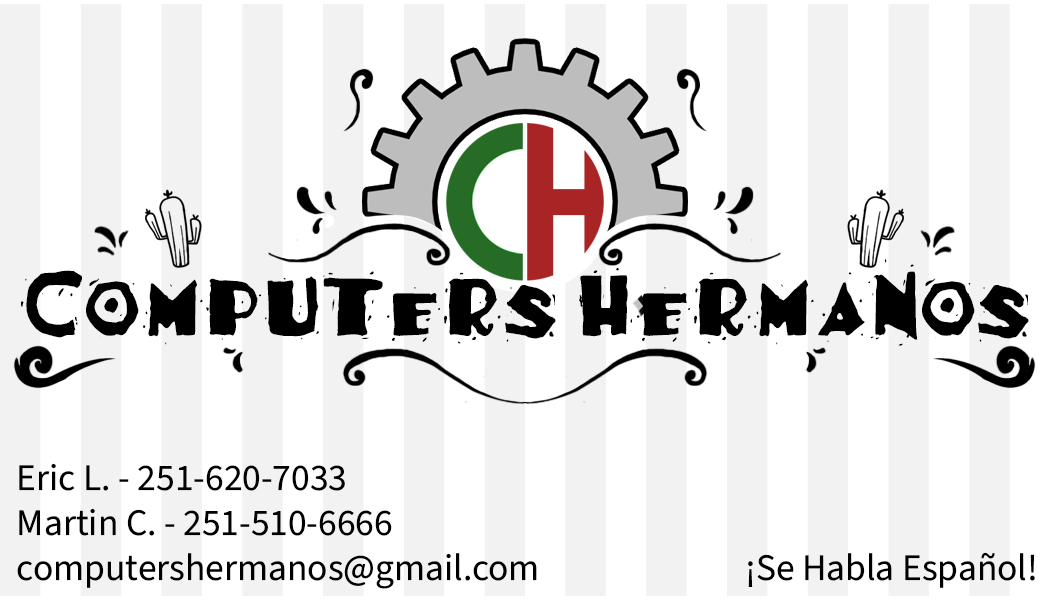
<style>
.page{position:relative;width:1050px;height:600px;background:#ffffff}
.page>*{position:absolute;margin:0}
.t1{font:100px "BurritoOne";color:#000000}
.t2{font:37.5px "SourceSans3Roman-Regular";color:#000000}
</style>
<div class="page">
<p class="t1" style="left:21px;top:259px;width:1008px;height:87px">Computers Hermanos</p>
<p class="t2" style="left:17px;top:463px;width:520px;height:126px">Eric L. - 251-620-7033<br>Martin C. - 251-510-6666<br>computershermanos@gmail.com</p>
<p class="t2" style="left:748px;top:552px;width:287px;height:36px">¡Se Habla Español!</p>
</div>
